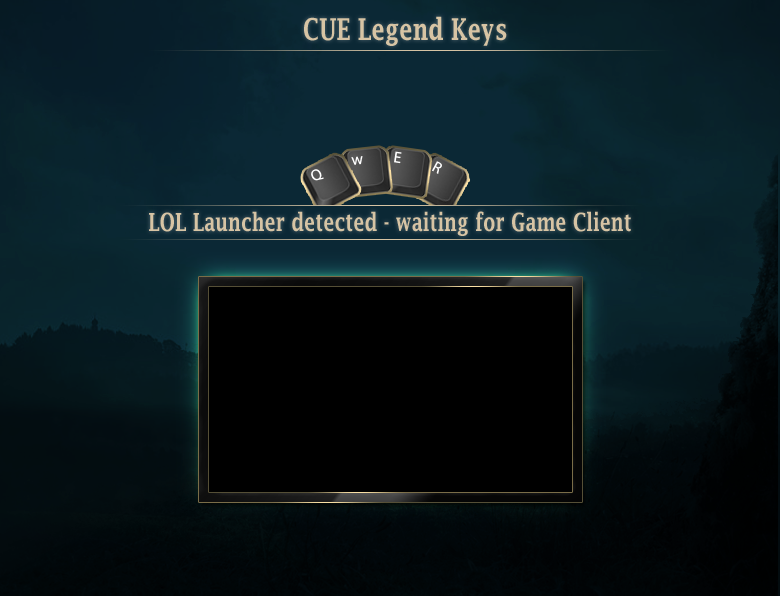
<style>
.page{position:relative;width:780px;height:596px}
.page>*{position:absolute;margin:0}
.t1{font:30px "LucidaFax-Demi";color:#d7c4a4;scale:0.75 1}
.t2{font:15.7px "MyriadPro-Regular";color:#ffffff}
.t3{font:25px "LucidaFax-Demi";color:#d7c4a4;scale:0.75 1}
</style>
<div class="page">
<p class="t1" style="left:304px;top:16px;width:203px;height:30px">CUE Legend Keys</p>
<p class="t2" style="left:351px;top:156px;width:12px;height:9px;rotate:-6deg">w</p>
<p class="t2" style="left:394px;top:151px;width:8px;height:13px;rotate:8deg">E</p>
<p class="t2" style="left:432px;top:161px;width:10px;height:13px;rotate:28deg">R</p>
<p class="t2" style="left:311px;top:169px;width:13px;height:12px;rotate:-28deg">Q</p>
<p class="t3" style="left:149px;top:211px;width:482px;height:25px">LOL Launcher detected - waiting for Game Client</p>
</div>
